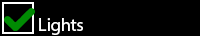
<style>
.page{position:relative;width:200px;height:36px;background:#000000}
.page>*{position:absolute;margin:0}
.t1{font:18px "MyriadPro-Regular";color:#ffffff}
</style>
<div class="page">
<p class="t1" style="left:39px;top:18px;width:44px;height:17px">Lights</p>
</div>
